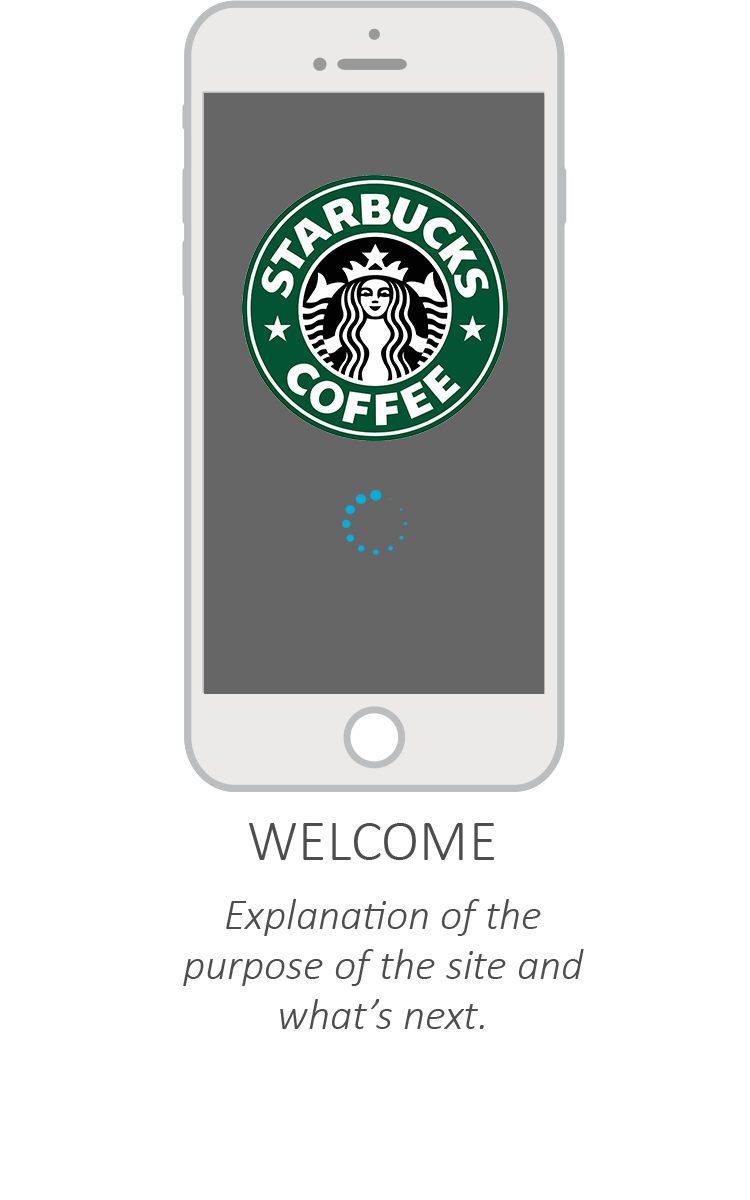
<style>
.page{position:relative;width:750px;height:1200px;background:#ffffff}
.page>*{position:absolute;margin:0}
.t1{font:100px "Calibri-Light";color:#4d4d4d}
.t2{font:75px/50px "Calibri-LightItalic";color:#4d4d4d}
</style>
<div class="page">
<p class="t1" style="left:249px;top:823px;width:245px;height:37px">WELCOME</p>
<p class="t2" style="left:183px;top:899px;width:401px;height:130px;text-align:center">Explanation of the<br>purpose of the site and<br>what’s next.</p>
</div>
